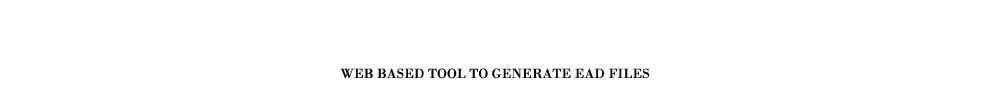
<style>
.page{position:relative;width:989px;height:95px;background:#ffffff}
.page>*{position:absolute;margin:0}
.t1{font:14px "BodoniMT";color:#000000}
</style>
<div class="page">
<p class="t1" style="left:340px;top:68px;width:310px;height:11px">WEB BASED TOOL TO GENERATE EAD FILES</p>
</div>
